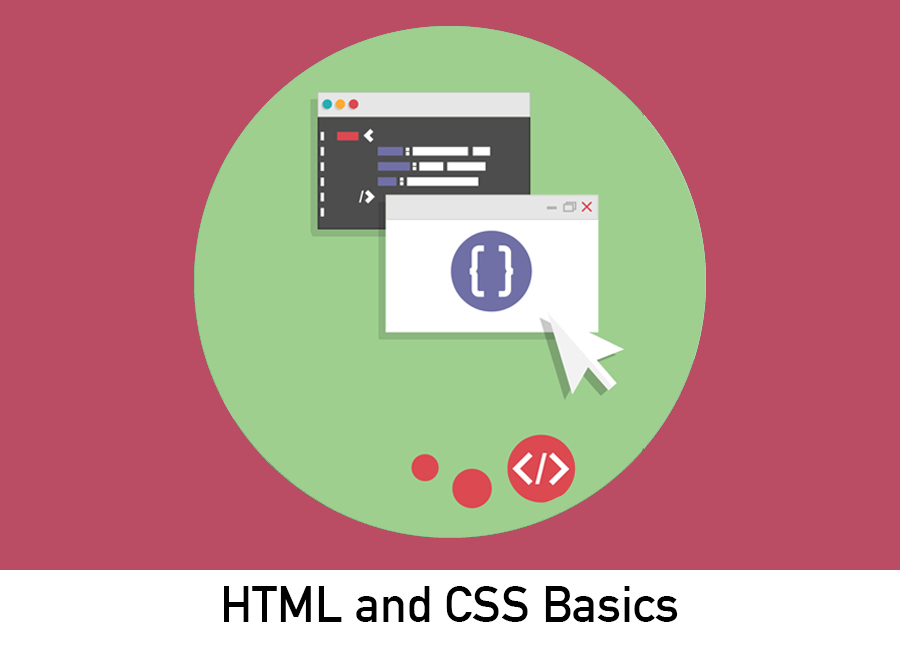
<style>
.page{position:relative;width:900px;height:650px;background:#ba4c63}
.page>*{position:absolute;margin:0}
.t1{font:50px "DINAlternate-Bold";color:#000000}
</style>
<div class="page">
<p class="t1" style="left:224px;top:586px;width:454px;height:36px">HTML and CSS Basics</p>
</div>
